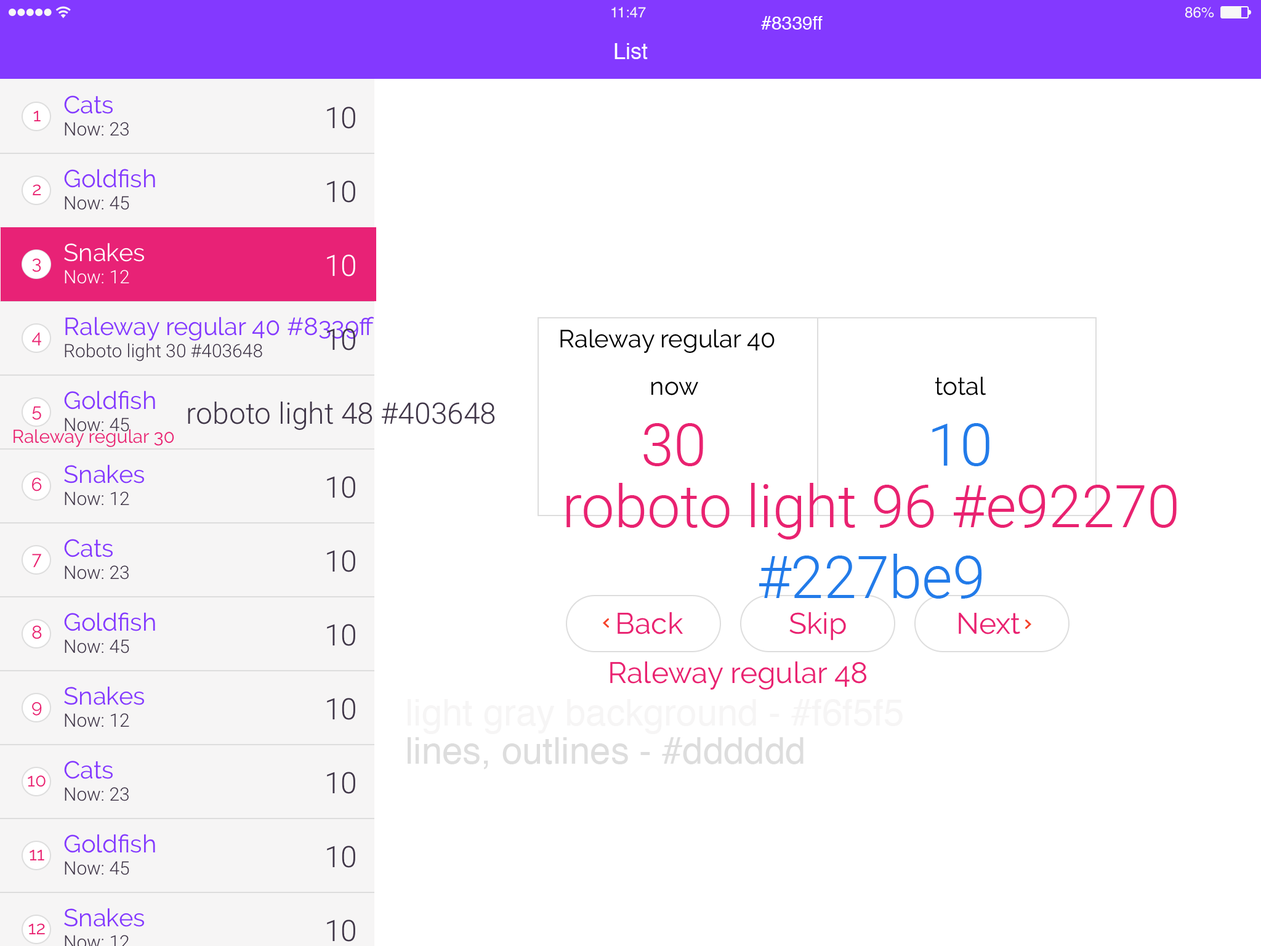
<style>
.page{position:relative;width:1261px;height:946px;background:#ffffff}
.page>*{position:absolute;margin:0}
.t1{font:18.5px "Helvetica";color:#ffffff}
.t2{font:22.2px "Helvetica";color:#ffffff}
.t3{font:18.5px "Roboto-Light";color:#403648}
.t4{font:24.6px "Raleway-Regular";color:#8339ff}
.t5{font:18.5px "Raleway-Regular";color:#e92270}
.t6{font:29.6px "Roboto-Light";color:#403648}
.t7{font:18.5px "Roboto-Light";color:#ffffff}
.t8{font:24.6px "Raleway-Regular";color:#ffffff}
.t9{font:29.6px "Roboto-Light";color:#ffffff}
.t10{font:24.6px "Raleway-Regular";color:#000000}
.t11{font:59.1px "Roboto-Light";color:#227be9}
.t12{font:59.1px "Roboto-Light";color:#e92270}
.t13{font:29.6px "Raleway-Regular";color:#e92270}
.t14{font:36.9px "Helvetica";color:#f6f5f5}
.t15{font:36.9px "Helvetica";color:#dddddd}
</style>
<div class="page">
<p class="t1" style="left:761px;top:16px;width:62px;height:14px">#8339ff</p>
<p class="t2" style="left:614px;top:43px;width:34px;height:16px">List</p>
<p class="t3" style="left:64px;top:95px;width:65px;height:41px"><span class="t4">Cats<br></span>Now: 23</p>
<p class="t5" style="left:33px;top:110px;width:8px;height:11px">1</p>
<p class="t6" style="left:327px;top:107px;width:28px;height:22px">10</p>
<p class="t4" style="left:64px;top:169px;width:91px;height:41px">Goldfish<br><span class="t3">Now: 45</span></p>
<p class="t5" style="left:33px;top:184px;width:8px;height:11px">2</p>
<p class="t6" style="left:327px;top:180px;width:28px;height:23px">10</p>
<p class="t7" style="left:64px;top:243px;width:80px;height:41px"><span class="t8">Snakes<br></span>Now: 12</p>
<p class="t5" style="left:32px;top:258px;width:9px;height:14px">3</p>
<p class="t9" style="left:327px;top:254px;width:28px;height:22px">10</p>
<p class="t4" style="left:65px;top:316px;width:309px;height:45px">Raleway regular 40 #8339ff<br><span class="t3">Roboto light 30 #403648</span></p>
<p class="t6" style="left:327px;top:328px;width:28px;height:22px">10</p>
<p class="t10" style="left:560px;top:329px;width:215px;height:24px">Raleway regular 40</p>
<p class="t5" style="left:32px;top:332px;width:9px;height:13px">4</p>
<p class="t10" style="left:932px;top:376px;width:57px;height:90px;text-align:center">total<br><span class="t11">10</span></p>
<p class="t10" style="left:643px;top:381px;width:60px;height:85px;text-align:center">now<br><span class="t12">30</span></p>
<p class="t4" style="left:64px;top:390px;width:91px;height:42px">Goldfish<br><span class="t3">Now: 45</span></p>
<p class="t6" style="left:188px;top:401px;width:307px;height:29px">roboto light 48 #403648</p>
<p class="t5" style="left:32px;top:406px;width:9px;height:14px">5</p>
<p class="t5" style="left:14px;top:429px;width:160px;height:18px">Raleway regular 30</p>
<p class="t3" style="left:64px;top:464px;width:80px;height:41px"><span class="t4">Snakes<br></span>Now: 12</p>
<p class="t5" style="left:32px;top:477px;width:10px;height:14px">6</p>
<p class="t6" style="left:327px;top:476px;width:28px;height:22px">10</p>
<p class="t12" style="left:566px;top:483px;width:611px;height:115px;text-align:center">roboto light 96 #e92270<br><span class="t11">#227be9</span></p>
<p class="t3" style="left:64px;top:539px;width:65px;height:40px"><span class="t4">Cats<br></span>Now: 23</p>
<p class="t5" style="left:32px;top:553px;width:10px;height:14px">7</p>
<p class="t6" style="left:327px;top:550px;width:28px;height:22px">10</p>
<p class="t4" style="left:64px;top:612px;width:91px;height:41px">Goldfish<br><span class="t3">Now: 45</span></p>
<p class="t13" style="left:618px;top:611px;width:65px;height:23px">Back</p>
<p class="t13" style="left:789px;top:611px;width:57px;height:29px">Skip</p>
<p class="t13" style="left:959px;top:612px;width:61px;height:22px">Next</p>
<p class="t5" style="left:32px;top:625px;width:10px;height:14px">8</p>
<p class="t6" style="left:327px;top:624px;width:28px;height:22px">10</p>
<p class="t13" style="left:610px;top:661px;width:256px;height:29px">Raleway regular 48</p>
<p class="t3" style="left:64px;top:686px;width:80px;height:41px"><span class="t4">Snakes<br></span>Now: 12</p>
<p class="t5" style="left:32px;top:701px;width:10px;height:14px">9</p>
<p class="t6" style="left:327px;top:698px;width:28px;height:22px">10</p>
<p class="t14" style="left:408px;top:699px;width:495px;height:35px">light gray background - #f6f5f5</p>
<p class="t15" style="left:408px;top:737px;width:395px;height:32px">lines, outlines - #dddddd</p>
<p class="t3" style="left:64px;top:760px;width:65px;height:41px"><span class="t4">Cats<br></span>Now: 23</p>
<p class="t6" style="left:327px;top:771px;width:28px;height:23px">10</p>
<p class="t5" style="left:28px;top:775px;width:18px;height:12px">10</p>
<p class="t4" style="left:64px;top:834px;width:91px;height:41px">Goldfish<br><span class="t3">Now: 45</span></p>
<p class="t6" style="left:327px;top:845px;width:28px;height:22px">10</p>
<p class="t5" style="left:30px;top:849px;width:14px;height:11px">11</p>
<p class="t5" style="left:28px;top:923px;width:17px;height:11px">12</p>
<p class="t6" style="left:327px;top:919px;width:28px;height:22px">10</p>
</div>
